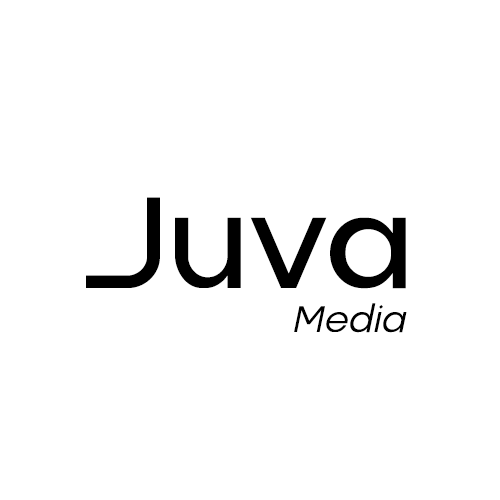
<style>
.page{position:relative;width:500px;height:500px;background:#ffffff}
.page>*{position:absolute;margin:0}
.t1{font:129.3px "AlacritySansRegular";color:#000000}
.t2{font:36.5px "AlacritySansLightItalic";color:#000000}
</style>
<div class="page">
<p class="t1" style="left:86px;top:197px;width:320px;height:92px">Juva</p>
<p class="t2" style="left:294px;top:303px;width:113px;height:30px">Media</p>
</div>
